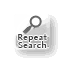
<style>
.page{position:relative;width:64px;height:64px;background:#ffffff}
.page>*{position:absolute;margin:0}
.t1{font:9px/8px "AmiraParadiso";letter-spacing:0.05em;color:#424242}
</style>
<div class="page">
<p class="t1" style="left:18px;top:34px;width:29px;height:14px;text-align:center">Repeat<br>Search</p>
</div>
